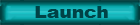
<style>
.page{position:relative;width:140px;height:25px}
.page>*{position:absolute;margin:0}
.t1{font:16.7px "Arial-Black";color:#004246;scale:1.12 1}
</style>
<div class="page">
<p class="t1" style="left:35px;top:6px;width:73px;height:12px">Launch</p>
</div>
